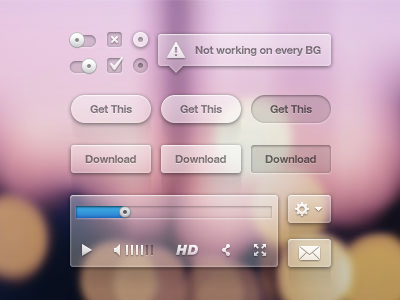
<style>
.page{position:relative;width:400px;height:300px}
.page>*{position:absolute;margin:0}
.t1{font:11px "HelveticaNeueLTCom-Bd";letter-spacing:-0.02em;color:#7e727c}
.t2{font:11px "HelveticaNeueLTCom-Bd";letter-spacing:-0.02em;color:#80757a}
.t3{font:11px "HelveticaNeueLTCom-Bd";letter-spacing:-0.02em;color:#7e7179}
.t4{font:11px "HelveticaNeueLTCom-Bd";letter-spacing:-0.02em;color:#5c4e54}
.t5{font:11px "HelveticaNeueLTCom-Bd";letter-spacing:-0.02em;color:#7d6c70}
.t6{font:11px "HelveticaNeueLTCom-Bd";letter-spacing:-0.02em;color:#7c6e71}
.t7{font:11px "HelveticaNeueLTCom-Bd";letter-spacing:-0.02em;color:#5e504f}
</style>
<div class="page">
<p class="t1" style="left:195px;top:46px;width:126px;height:10px">Not working on every BG</p>
<p class="t2" style="left:90px;top:105px;width:42px;height:8px">Get This</p>
<p class="t3" style="left:180px;top:105px;width:42px;height:8px">Get This</p>
<p class="t4" style="left:270px;top:105px;width:42px;height:8px">Get This</p>
<p class="t5" style="left:85px;top:155px;width:51px;height:8px">Download</p>
<p class="t6" style="left:175px;top:155px;width:51px;height:8px">Download</p>
<p class="t7" style="left:265px;top:155px;width:51px;height:8px">Download</p>
</div>
